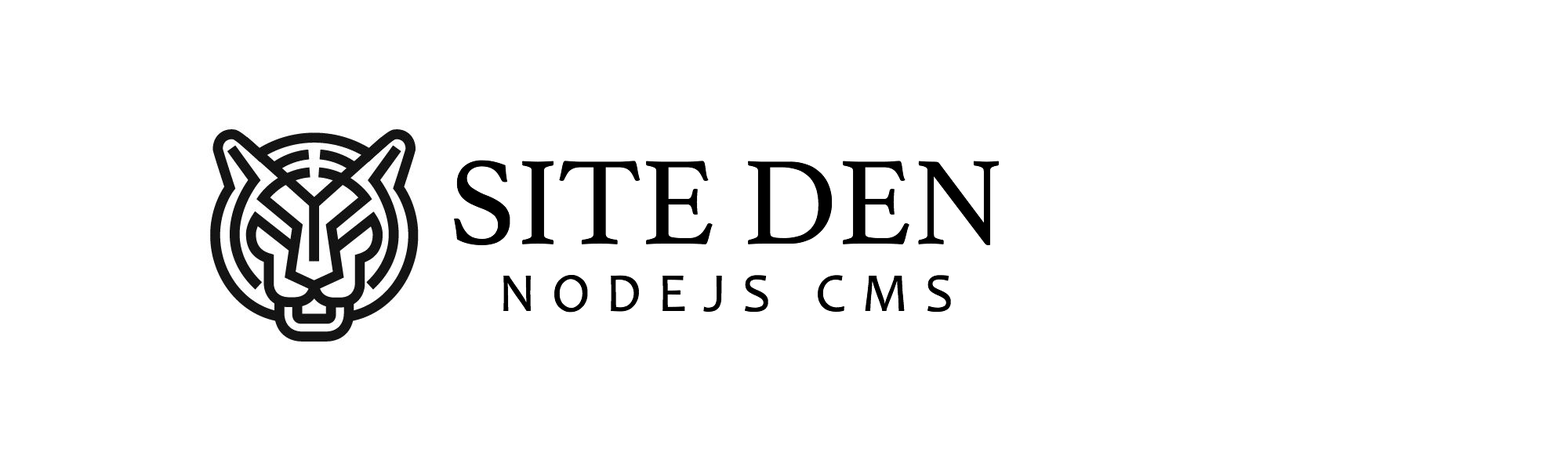
<style>
.page{position:relative;width:1568px;height:470px;background:#ffffff}
.page>*{position:absolute;margin:0}
.t1{font:125.4px "Athelas-Regular";color:#000000}
.t2{font:54.9px "Candara";letter-spacing:0.3em;color:#000000}
</style>
<div class="page">
<p class="t1" style="left:454px;top:160px;width:545px;height:85px">SITE DEN</p>
<p class="t2" style="left:503px;top:275px;width:448px;height:38px">NODEJS CMS</p>
</div>
